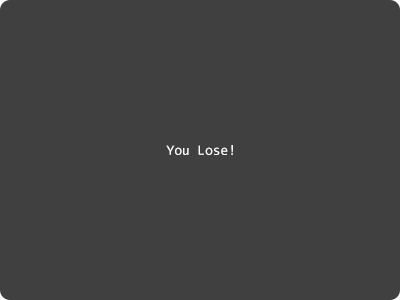
<style>
.page{position:relative;width:400px;height:300px;background:#404040}
.page>*{position:absolute;margin:0}
.t1{font:14px "Consolas";color:#ffffff}
</style>
<div class="page">
<p class="t1" style="left:166px;top:145px;width:67px;height:10px">You Lose!</p>
</div>
